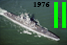
<style>
.page{position:relative;width:67px;height:45px}
.page>*{position:absolute;margin:0}
.t1{font:10.3px "Aparajita-Bold";color:#000000}
</style>
<div class="page">
<p class="t1" style="left:33px;top:2px;width:17px;height:5px">1976</p>
</div>
